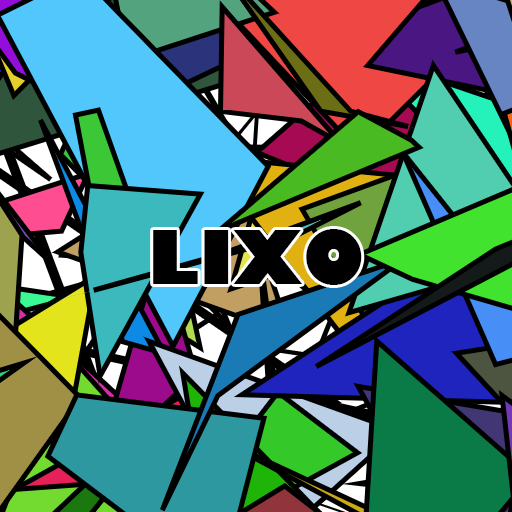
<style>
.page{position:relative;width:512px;height:512px}
.page>*{position:absolute;margin:0}
.t1{font:72px "GillSans-UltraBold";color:#000000}
</style>
<div class="page">
<p class="t1" style="left:153px;top:229px;width:209px;height:56px">LIXO</p>
</div>
